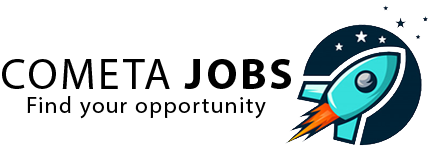
<style>
.page{position:relative;width:431px;height:149px;background:#ffffff}
.page>*{position:absolute;margin:0}
.t1{font:43.9px "MyriadPro-Regular";letter-spacing:0.06em;color:#000000}
.t2{font:43.9px "MyriadPro-Bold";letter-spacing:0.06em;color:#000000}
.t3{font:22.8px "MyriadPro-Regular";letter-spacing:0.06em;color:#000000}
</style>
<div class="page">
<p class="t1" style="left:2px;top:59px;width:289px;height:30px">COMETA <span class="t2">JOBS</span></p>
<p class="t3" style="left:27px;top:96px;width:239px;height:23px">Find your opportunity</p>
</div>
